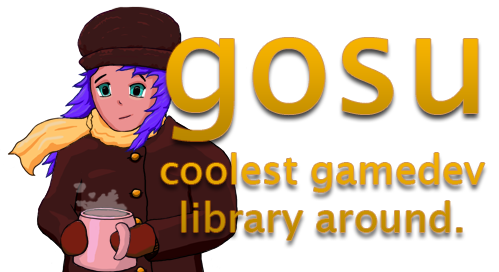
<style>
.page{position:relative;width:499px;height:272px;background:#ffffff}
.page>*{position:absolute;margin:0}
.t1{font:140px "LucidaSans";color:#dea100}
.t2{font:40px "LucidaSans"}
</style>
<div class="page">
<p class="t1" style="left:166px;top:38px;width:312px;height:103px">gosu</p>
<p class="t2" style="left:161px;top:153px;width:324px;height:87px;text-align:center">coolest gamedev<br>library around.</p>
</div>
